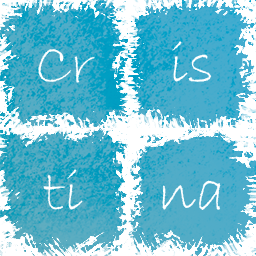
<style>
.page{position:relative;width:256px;height:256px}
.page>*{position:absolute;margin:0}
.t1{font:60px "BradleyHandITC";color:#ffffff}
</style>
<div class="page">
<p class="t1" style="left:172px;top:41px;width:40px;height:41px">is</p>
<p class="t1" style="left:38px;top:49px;width:57px;height:34px">Cr</p>
<p class="t1" style="left:43px;top:169px;width:40px;height:41px">ti</p>
<p class="t1" style="left:162px;top:180px;width:59px;height:30px">na</p>
</div>
